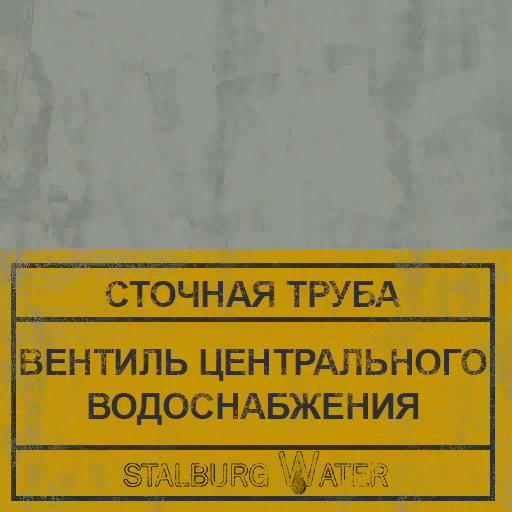
<style>
.page{position:relative;width:512px;height:512px}
.page>*{position:absolute;margin:0}
.t1{font:36px "Arial-BoldMT";letter-spacing:-0.02em;color:#303030}
.t2{font:36px/44px "Arial-BoldMT";letter-spacing:-0.02em;color:#303030}
</style>
<div class="page">
<p class="t1" style="left:105px;top:281px;width:296px;height:26px">СТОЧНАЯ ТРУБА</p>
<p class="t2" style="left:20px;top:349px;width:467px;height:76px;text-align:center">ВЕНТИЛЬ ЦЕНТРАЛЬНОГО<br>ВОДОСНАБЖЕНИЯ</p>
</div>
